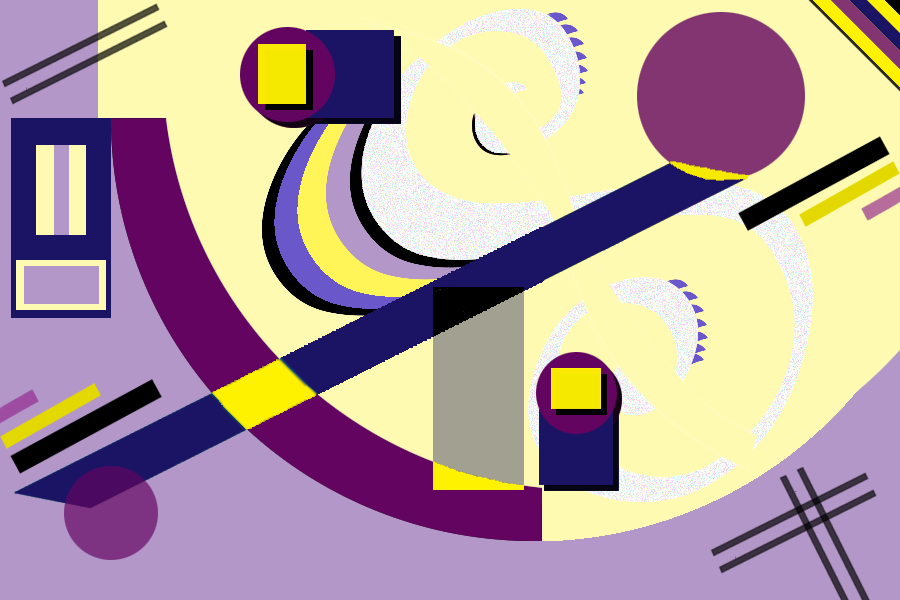
<style>
.page{position:relative;width:900px;height:600px;background:#fffab2}
.page>*{position:absolute;margin:0}
.t1{font:759.2px "CurlzMT";scale:1.15 1}
</style>
<div class="page">
<p class="t1" style="left:361px;top:9px;width:452px;height:493px;rotate:-35deg">S</p>
</div>
